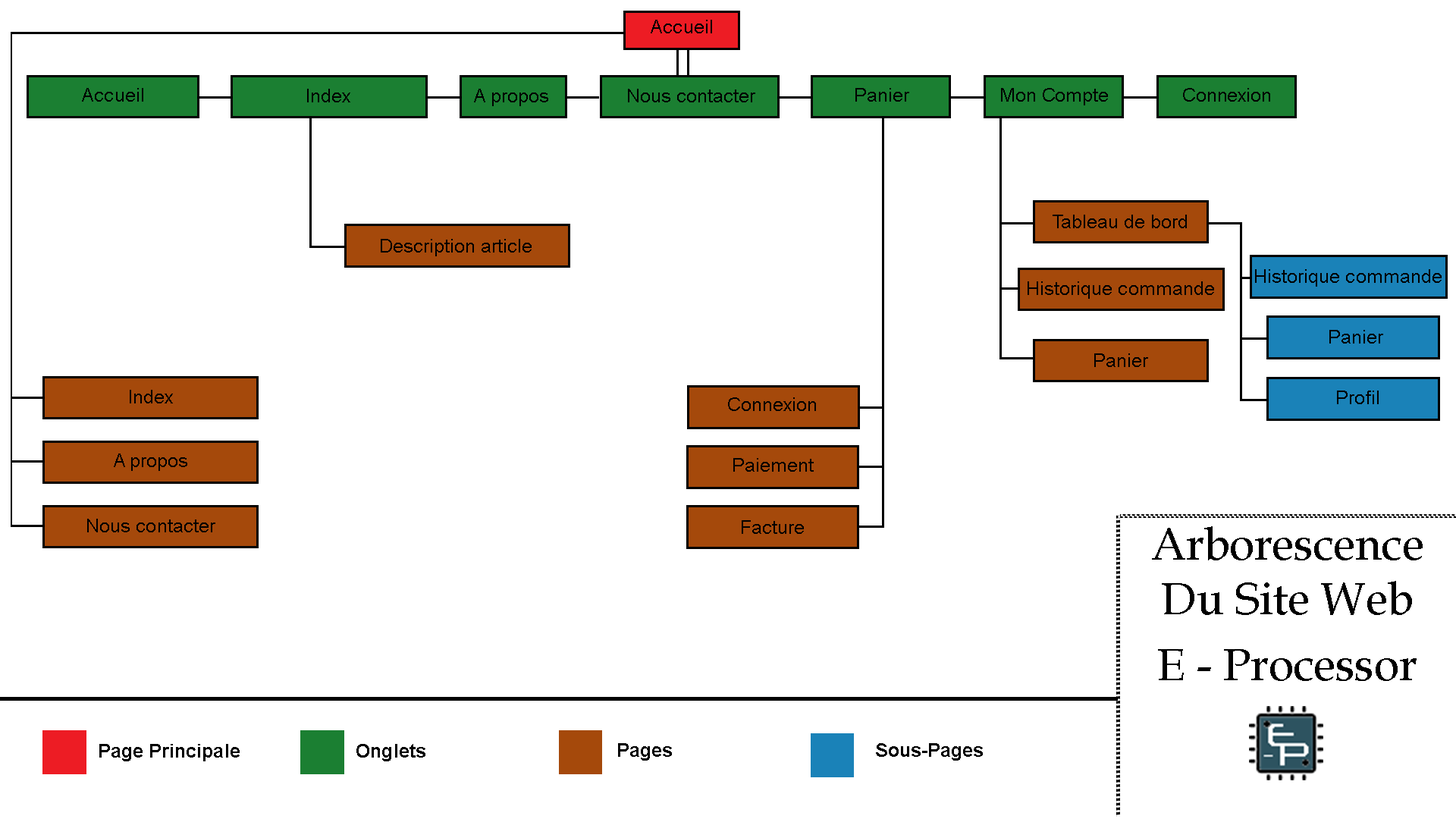
<style>
.page{position:relative;width:1456px;height:819px;background:#ffffff}
.page>*{position:absolute;margin:0}
.t1{font:19px "ArialMT";color:#000000}
.t2{font:19.2px "ArialMT";color:#000000}
.t3{font:18.9px "ArialMT";color:#000000}
.t4{font:45.5px "BookAntiqua";color:#000000}
.t5{font:19px "Arial-BoldMT";color:#000000}
</style>
<div class="page">
<p class="t1" style="left:651px;top:20px;width:61px;height:13px">Accueil</p>
<p class="t1" style="left:82px;top:88px;width:61px;height:14px">Accueil</p>
<p class="t2" style="left:307px;top:89px;width:43px;height:13px">Index</p>
<p class="t2" style="left:474px;top:89px;width:74px;height:17px">A propos</p>
<p class="t2" style="left:628px;top:89px;width:127px;height:13px">Nous contacter</p>
<p class="t1" style="left:855px;top:88px;width:54px;height:14px">Panier</p>
<p class="t3" style="left:1001px;top:88px;width:107px;height:17px">Mon Compte</p>
<p class="t3" style="left:1183px;top:88px;width:87px;height:14px">Connexion</p>
<p class="t2" style="left:1053px;top:215px;width:134px;height:13px">Tableau de bord</p>
<p class="t2" style="left:381px;top:239px;width:151px;height:17px">Description article</p>
<p class="t2" style="left:1255px;top:269px;width:187px;height:18px">Historique commande</p>
<p class="t2" style="left:1028px;top:281px;width:186px;height:18px">Historique commande</p>
<p class="t2" style="left:1329px;top:330px;width:54px;height:14px">Panier</p>
<p class="t2" style="left:1094px;top:353px;width:54px;height:14px">Panier</p>
<p class="t2" style="left:130px;top:390px;width:43px;height:13px">Index</p>
<p class="t3" style="left:728px;top:397px;width:88px;height:14px">Connexion</p>
<p class="t2" style="left:1337px;top:391px;width:42px;height:13px">Profil</p>
<p class="t2" style="left:114px;top:453px;width:73px;height:18px">A propos</p>
<p class="t2" style="left:733px;top:458px;width:81px;height:14px">Paiement</p>
<p class="t2" style="left:87px;top:519px;width:128px;height:13px">Nous contacter</p>
<p class="t2" style="left:742px;top:520px;width:62px;height:14px">Facture</p>
<p class="t4" style="left:1152px;top:526px;width:271px;height:89px;text-align:center">Arborescence<br>Du Site Web</p>
<p class="t4" style="left:1158px;top:649px;width:259px;height:32px">E - Processor</p>
<p class="t5" style="left:99px;top:744px;width:141px;height:17px">Page Principale</p>
<p class="t5" style="left:356px;top:744px;width:69px;height:17px">Onglets</p>
<p class="t5" style="left:618px;top:743px;width:54px;height:18px">Pages</p>
<p class="t5" style="left:876px;top:743px;width:107px;height:18px">Sous-Pages</p>
</div>
